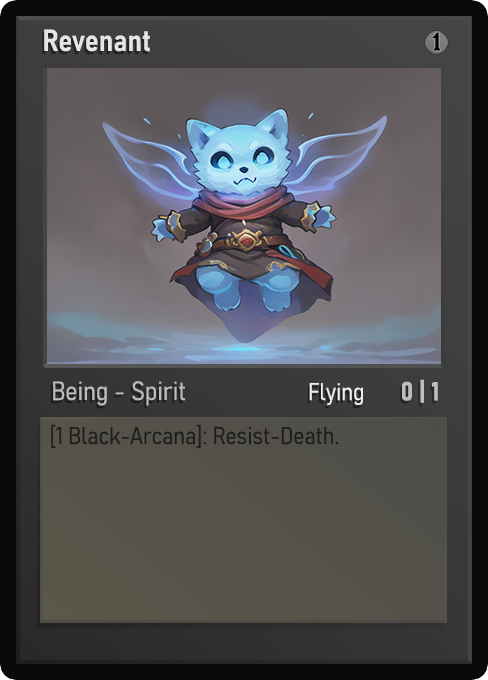
<style>
.page{position:relative;width:488px;height:680px}
.page>*{position:absolute;margin:0}
.t1{font:30px "Bahnschrift-SemiBoldSemiCondensed";color:#f2f2f2;font-weight:bold}
.t2{font:25px "WTRRoycroft";color:#000000;font-weight:bold;scale:1.09 1}
.t3{font:26px "Bahnschrift-LightSemiCondensed";color:#c8c8c8;font-weight:bold}
.t4{font:24px "Bahnschrift-LightSemiCondensed";color:#f0efef;font-weight:bold}
.t5{font:26px "Bahnschrift-BoldSemiCondensed";color:#bdbdbd;font-weight:bold}
.t6{font:24px "Bahnschrift-LightSemiCondensed";color:#1e1e1e;font-weight:bold}
</style>
<div class="page">
<p class="t1" style="left:44px;top:29px;width:106px;height:23px;opacity:0.9">Revenant</p>
<p class="t2" style="left:432px;top:32px;width:9px;height:19px">1</p>
<p class="t3" style="left:53px;top:381px;width:132px;height:25px;opacity:0.9">Being - Spirit</p>
<p class="t4" style="left:309px;top:383px;width:54px;height:23px">Flying</p>
<p class="t5" style="left:402px;top:379px;width:36px;height:24px">0 | 1</p>
<p class="t6" style="left:51px;top:424px;width:287px;height:24px">[1 Black-Arcana]: Resist-Death.</p>
</div>
